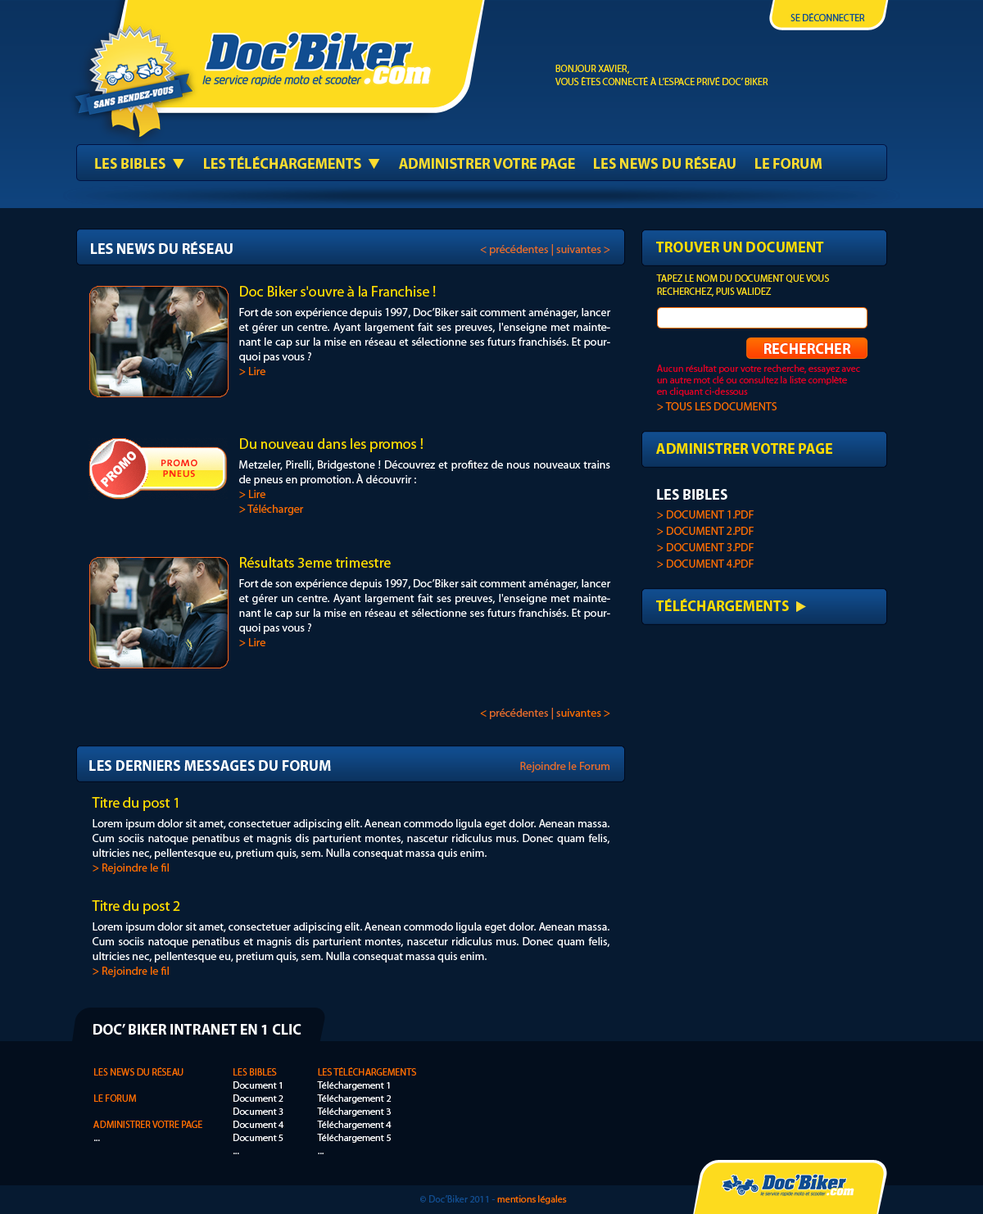
<style>
.page{position:relative;width:983px;height:1214px;background:#061a31}
.page>*{position:absolute;margin:0}
.t1{font:9.8px "MyriadPro-Regular";color:#114d91;text-transform:uppercase}
.t2{font:9.8px/13.1px "MyriadPro-Regular";color:#fddb1e;text-transform:uppercase}
.t3{font:14.7px "MyriadPro-Bold";color:#fddc2f;text-transform:uppercase}
.t4{font:13.1px "Wingdings3";color:#fddc2f}
.t5{font:14.7px "MyriadPro-Bold";color:#ffffff}
.t6{font:11.5px "MyriadPro-Regular";color:#e86c2b}
.t7{font:14.7px "MyriadPro-Bold";color:#ffdb00;text-transform:uppercase}
.t8{font:11.5px/14.7px "MyriadPro-Regular";color:#ffffff}
.t9{font:14.7px/24.6px "MyriadPro-Regular";color:#ffdb00}
.t10{font:11.5px/19.7px "MyriadPro-Regular";color:#ffffff}
.t11{font:11.5px/14.7px "MyriadPro-Regular";color:#ff6d01}
.t12{font:9.8px/11.5px "MyriadPro-Regular";color:#df0023}
.t13{font:11.5px "MyriadPro-Regular";color:#ff6d01;text-transform:uppercase}
.t14{font:14.7px "MyriadPro-Bold";color:#ffffff;text-transform:uppercase}
.t15{font:11.5px/16.4px "MyriadPro-Regular";color:#ff6d01;text-transform:uppercase}
.t16{font:11.5px "MyriadPro-Regular";color:#ff6d01}
.t17{font:9.8px/13.1px "MyriadPro-Regular";color:#ff6d01;text-transform:uppercase}
.t18{font:9.8px/13.1px "MyriadPro-Regular";color:#ffffff}
.t19{font:9.8px "MyriadPro-Regular";color:#114c8e}
.t20{font:9.8px "MyriadPro-Regular";color:#ff6d01}
</style>
<div class="page">
<p class="t1" style="left:790px;top:13px;width:75px;height:8px">se déconnecter</p>
<p class="t2" style="left:555px;top:65px;width:213px;height:20px">Bonjour xavier,<br>VOUS ÊTES CONNECTÉ À L’ESPACE PRIVÉ DOC’ BIKER</p>
<p class="t3" style="left:95px;top:156px;width:726px;height:13px">Les bibles  <span class="t4">q</span>      Les téléchargements  <span class="t4">q</span>      ADMINISTRER VOTRE PAGE      Les news DU RÉSEAU      Le forum</p>
<p class="t5" style="left:91px;top:242px;width:142px;height:12px">LES NEWS DU RÉSEAU</p>
<p class="t6" style="left:480px;top:244px;width:130px;height:12px">&lt; précédentes | suivantes &gt;</p>
<p class="t7" style="left:656px;top:242px;width:168px;height:10px">TROUVER UN DOCUMENT</p>
<p class="t2" style="left:656px;top:274px;width:173px;height:22px">TAPEZ LE NOM DU DOCUMENT QUE VOUS<br>RECHERCHEZ, PUIS VALIDEZ</p>
<p class="t8" style="left:239px;top:286px;width:372px;height:89px"><span class="t9">Doc Biker s'ouvre à la Franchise !<br></span><span class="t10">Fort de son expérience depuis 1997, Doc’Biker sait comment aménager, lancer </span>et gérer un centre. Ayant largement fait ses preuves, l'enseigne met maintenant le cap sur la mise en réseau et sélectionne ses futurs franchisés. Et pourquoi pas vous ?<br><span class="t11">&gt; Lire</span></p>
<p class="t5" style="left:764px;top:343px;width:87px;height:11px">RECHERCHER</p>
<p class="t12" style="left:657px;top:364px;width:203px;height:32px">Aucun résultat pour votre recherche, essayez avec<br>un autre mot clé ou consultez la liste complète<br>en cliquant ci-dessous</p>
<p class="t13" style="left:657px;top:402px;width:119px;height:8px">&gt; TOUS LES DOCUMENTS</p>
<p class="t10" style="left:239px;top:438px;width:371px;height:77px"><span class="t9">Du nouveau dans les promos !<br></span>Metzeler, Pirelli, Bridgestone ! Découvrez et profitez de nous nouveaux trains <span class="t8">de pneus en promotion. À découvrir :<br></span><span class="t11">&gt; Lire <br>&gt; Télécharger</span></p>
<p class="t7" style="left:656px;top:443px;width:176px;height:11px">ADMINISTRER VOTRE PAGE</p>
<p class="t14" style="left:657px;top:489px;width:70px;height:10px">LES BIBLES</p>
<p class="t15" style="left:657px;top:510px;width:96px;height:57px">&gt; DOCUMENT 1.pdf<br>&gt; DOCUMENT 2.pdf<br>&gt; DOCUMENT 3.pdf<br>&gt; DOCUMENT 4.pdf</p>
<p class="t8" style="left:239px;top:557px;width:372px;height:89px"><span class="t9">Résultats 3eme trimestre<br></span><span class="t10">Fort de son expérience depuis 1997, Doc’Biker sait comment aménager, lancer </span>et gérer un centre. Ayant largement fait ses preuves, l'enseigne met maintenant le cap sur la mise en réseau et sélectionne ses futurs franchisés. Et pourquoi pas vous ?<br><span class="t11">&gt; Lire</span></p>
<p class="t7" style="left:656px;top:599px;width:150px;height:13px">TÉLÉCHARGEMENTS  <span class="t4">u</span></p>
<p class="t6" style="left:480px;top:707px;width:130px;height:13px"><span class="t16">&lt;</span> précédentes | s<span class="t16">uivantes &gt;</span></p>
<p class="t5" style="left:89px;top:760px;width:242px;height:11px">LES DERNIERS MESSAGES DU FORUM</p>
<p class="t6" style="left:520px;top:762px;width:89px;height:10px">Rejoindre le Forum</p>
<p class="t8" style="left:92px;top:797px;width:517px;height:180px"><span class="t9">Titre du post 1<br></span><span class="t10">Lorem ipsum dolor sit amet, consectetuer adipiscing elit. Aenean commodo </span>ligula eget dolor. Aenean massa. Cum sociis natoque penatibus et magnis dis parturient montes, nascetur ridiculus mus. Donec quam felis, ultricies nec, pellentesque eu, pretium quis, sem. Nulla consequat massa quis enim.<br><span class="t11">&gt; Rejoindre le fil<br><br></span><span class="t9">Titre du post 2<br></span><span class="t10">Lorem ipsum dolor sit amet, consectetuer adipiscing elit. Aenean commodo </span>ligula eget dolor. Aenean massa. Cum sociis natoque penatibus et magnis dis parturient montes, nascetur ridiculus mus. Donec quam felis, ultricies nec, pellentesque eu, pretium quis, sem. Nulla consequat massa quis enim.<br><span class="t11">&gt; Rejoindre le fil</span></p>
<p class="t5" style="left:93px;top:1023px;width:208px;height:11px">DOC’ BIKER INTRANET EN 1 CLIC</p>
<p class="t17" style="left:93px;top:1067px;width:109px;height:74px;text-align:justify">Les NEWS DU RÉSEAU<br><br>LE FORUM<br><br>ADMINISTRER VOTRE PAGE<br><span class="t18">...</span></p>
<p class="t18" style="left:233px;top:1068px;width:51px;height:86px;text-align:justify"><span class="t17">Les BIBLES<br></span>Document 1<br>Document 2<br>Document 3<br>Document 4<br>Document 5<br>...</p>
<p class="t18" style="left:317px;top:1067px;width:99px;height:87px;text-align:justify"><span class="t17">Les TÉLÉCHARGEMENTS<br></span>Téléchargement 1<br>Téléchargement 2<br>Téléchargement 3<br>Téléchargement 4<br>Téléchargement 5<br>...</p>
<p class="t19" style="left:420px;top:1194px;width:147px;height:10px">© Doc’Biker 2011 - <span class="t20">mentions légales</span></p>
</div>
